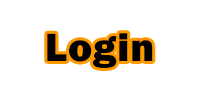
<style>
.page{position:relative;width:200px;height:100px;background:#ffffff}
.page>*{position:absolute;margin:0}
.t1{font:40.6px "FranklinGothic-Heavy";letter-spacing:0.025em;color:#ff8400}
</style>
<div class="page">
<p class="t1" style="left:47px;top:33px;width:106px;height:35px">Login</p>
</div>
